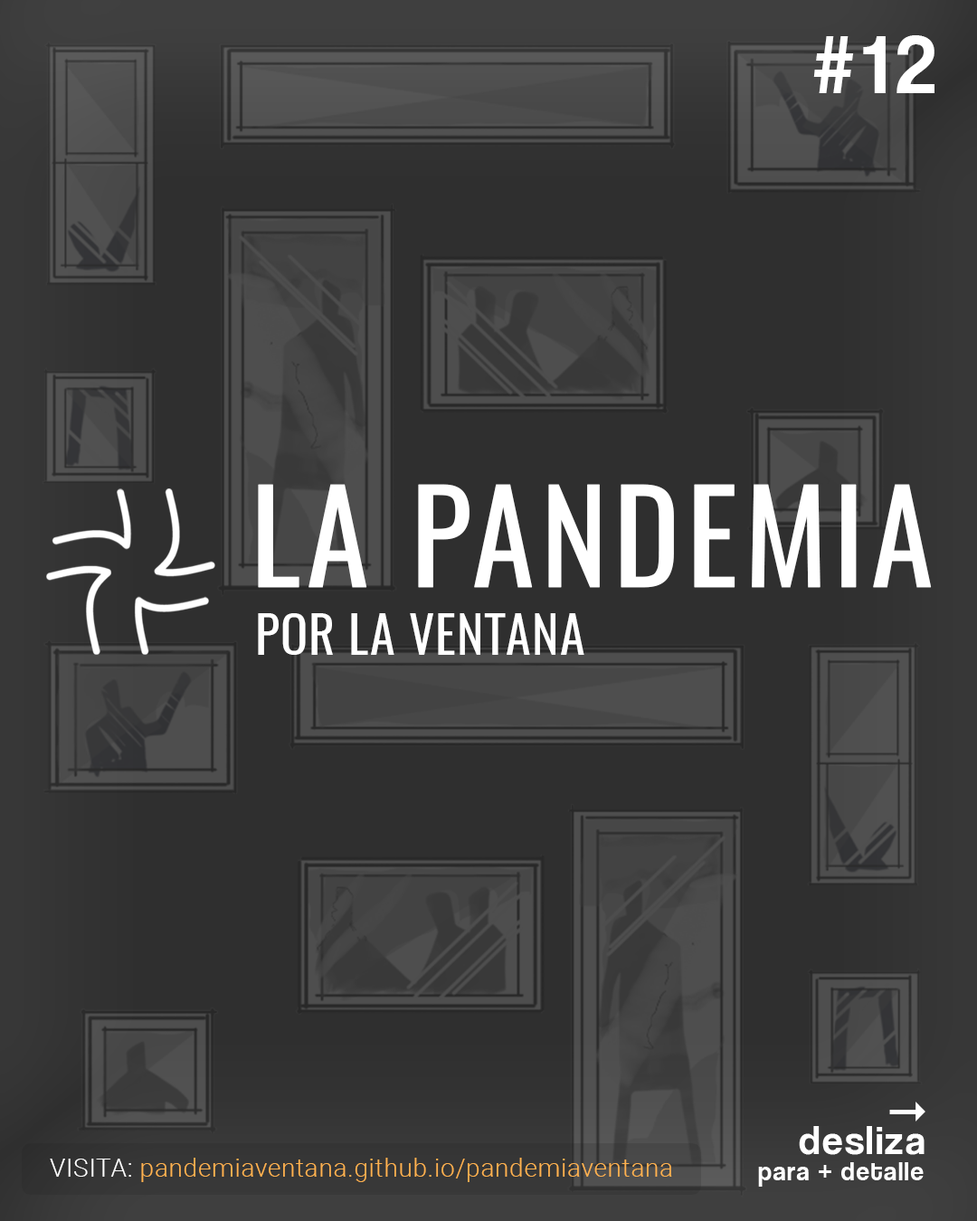
<style>
.page{position:relative;width:977px;height:1221px;background:#2f2f2f}
.page>*{position:absolute;margin:0}
.t1{font:83.5px "CoolveticaRg-Regular";letter-spacing:0.1em;color:#ffffff}
.t2{font:125.6px "Oswald-Regular";letter-spacing:0.025em;color:#ffffff;font-weight:bold}
.t3{font:50.2px "Oswald-Regular";letter-spacing:0.025em;color:#ffffff}
.t4{font:51.6px "Arrows";letter-spacing:0.05em;color:#ffffff}
.t5{font:40.7px "CoolveticaRg-Regular";letter-spacing:0.05em;color:#ffffff}
.t6{font:25.1px "Roboto-Light";letter-spacing:0.025em;color:#ffb24f}
.t7{font:25.1px "Roboto-Light";letter-spacing:0.025em;color:#ffffff}
.t8{font:26.4px "CoolveticaRg-Regular";letter-spacing:0.05em;color:#ffffff}
</style>
<div class="page">
<p class="t1" style="left:813px;top:35px;width:121px;height:58px">#12</p>
<p class="t2" style="left:258px;top:484px;width:673px;height:104px">LA PANDEMIA</p>
<p class="t3" style="left:258px;top:613px;width:326px;height:42px">POR LA VENTANA</p>
<p class="t4" style="left:889px;top:1102px;width:36px;height:19px">A</p>
<p class="t5" style="left:799px;top:1126px;width:125px;height:29px">desliza</p>
<p class="t6" style="left:50px;top:1158px;width:622px;height:24px"><span class="t7">VISITA: </span>pandemiaventana.github.io/pandemiaventana</p>
<p class="t8" style="left:758px;top:1162px;width:165px;height:25px">para + detalle</p>
</div>
